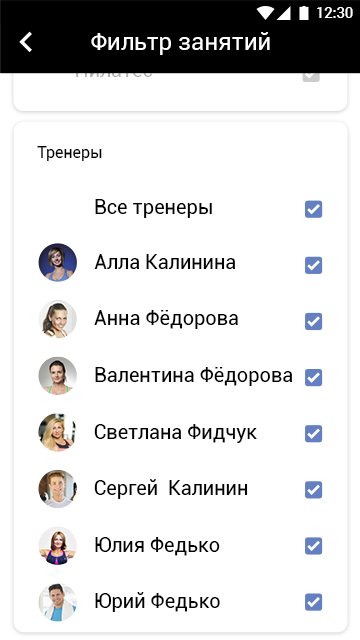
<style>
.page{position:relative;width:360px;height:640px;background:#ffffff}
.page>*{position:absolute;margin:0}
.t1{font:14.7px "Roboto-Medium";color:#ffffff}
.t2{font:24px "Roboto-Regular";color:#ffffff}
.t3{font:16px "Roboto-Regular";color:#000000}
.t4{font:20px "Roboto-Regular";color:#000000}
.t5{font:20px "Roboto-Regular";color:#010101}
</style>
<div class="page">
<p class="t1" style="left:317px;top:7px;width:36px;height:11px">12:30</p>
<p class="t2" style="left:91px;top:32px;width:179px;height:23px">Фильтр занятий</p>
<p class="t3" style="left:37px;top:146px;width:65px;height:15px">Тренеры</p>
<p class="t4" style="left:95px;top:199px;width:117px;height:19px">Все тренеры</p>
<p class="t4" style="left:94px;top:254px;width:142px;height:15px">Алла Калинина</p>
<p class="t4" style="left:94px;top:310px;width:144px;height:19px">Анна Фёдорова</p>
<p class="t4" style="left:95px;top:367px;width:198px;height:19px">Валентина Фёдорова</p>
<p class="t5" style="left:94px;top:424px;width:163px;height:19px">Светлана Фидчук</p>
<p class="t4" style="left:94px;top:479px;width:154px;height:20px">Сергей  Калинин</p>
<p class="t4" style="left:95px;top:537px;width:125px;height:19px">Юлия Федько</p>
<p class="t4" style="left:95px;top:592px;width:125px;height:20px">Юрий Федько</p>
</div>
